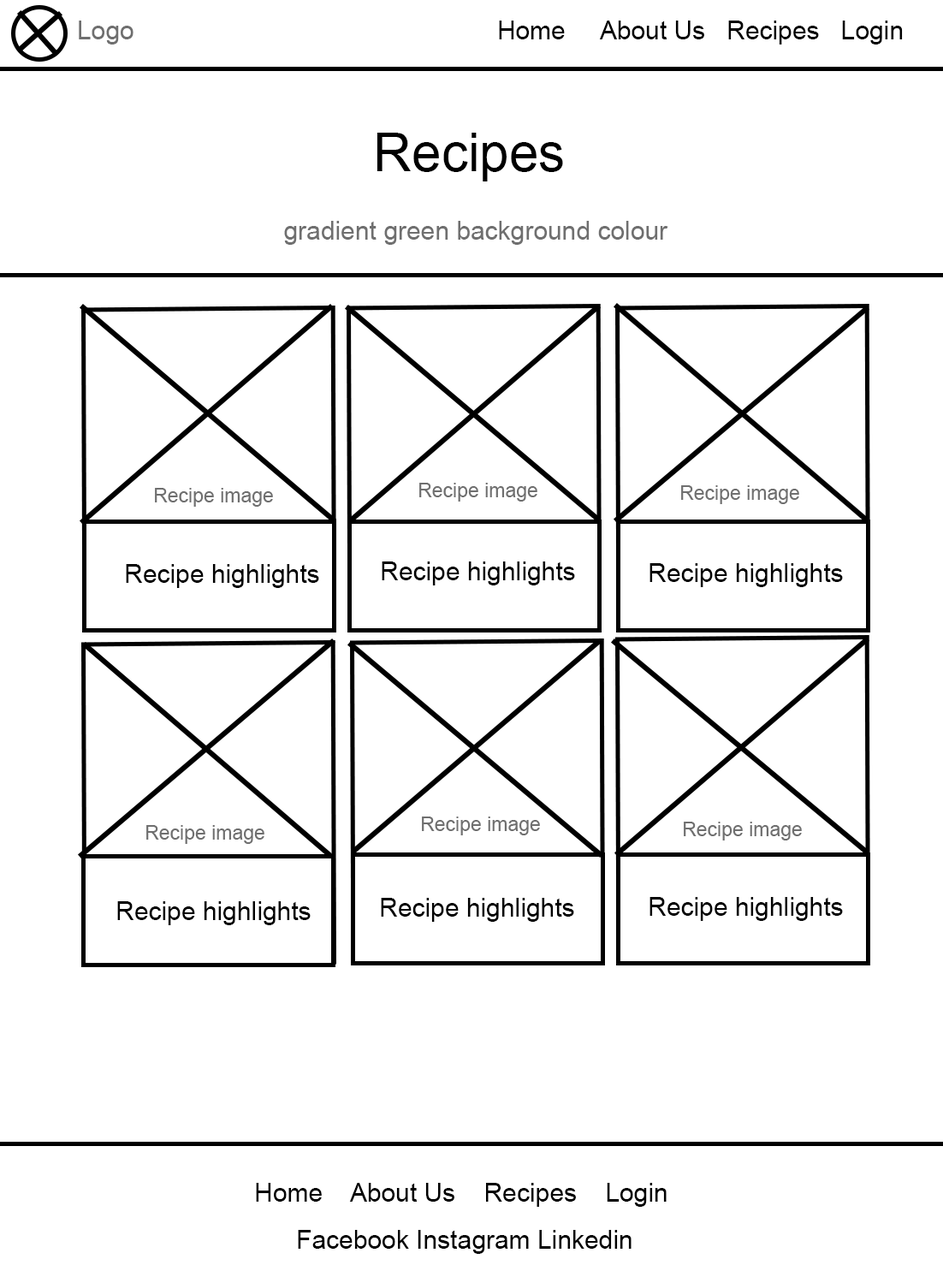
<style>
.page{position:relative;width:943px;height:1265px;background:#ffffff}
.page>*{position:absolute;margin:0}
.t1{font:25.7px "ArialMT";color:#6f6f6f}
.t2{font:25.7px "ArialMT";color:#000000}
.t3{font:53px "ArialMT";color:#000000}
.t4{font:19.7px "ArialMT";color:#6f6f6f}
</style>
<div class="page">
<p class="t1" style="left:79px;top:21px;width:54px;height:23px">Logo</p>
<p class="t2" style="left:499px;top:21px;width:404px;height:23px">Home     About Us   Recipes   Login</p>
<p class="t3" style="left:376px;top:133px;width:187px;height:48px">Recipes</p>
<p class="t1" style="left:284px;top:221px;width:384px;height:24px">gradient green background colour</p>
<p class="t4" style="left:419px;top:483px;width:118px;height:18px">Recipe image</p>
<p class="t4" style="left:681px;top:485px;width:118px;height:19px">Recipe image</p>
<p class="t4" style="left:155px;top:488px;width:118px;height:19px">Recipe image</p>
<p class="t2" style="left:126px;top:564px;width:193px;height:24px">Recipe highlights</p>
<p class="t2" style="left:382px;top:561px;width:193px;height:24px">Recipe highlights</p>
<p class="t2" style="left:649px;top:563px;width:194px;height:24px">Recipe highlights</p>
<p class="t4" style="left:422px;top:816px;width:118px;height:19px">Recipe image</p>
<p class="t4" style="left:684px;top:821px;width:118px;height:19px">Recipe image</p>
<p class="t4" style="left:146px;top:825px;width:118px;height:19px">Recipe image</p>
<p class="t2" style="left:117px;top:901px;width:194px;height:24px">Recipe highlights</p>
<p class="t2" style="left:381px;top:898px;width:193px;height:24px">Recipe highlights</p>
<p class="t2" style="left:649px;top:897px;width:194px;height:24px">Recipe highlights</p>
<p class="t2" style="left:256px;top:1182px;width:411px;height:24px">Home    About Us    Recipes    Login</p>
<p class="t2" style="left:298px;top:1230px;width:333px;height:24px">Facebook Instagram Linkedin</p>
</div>
